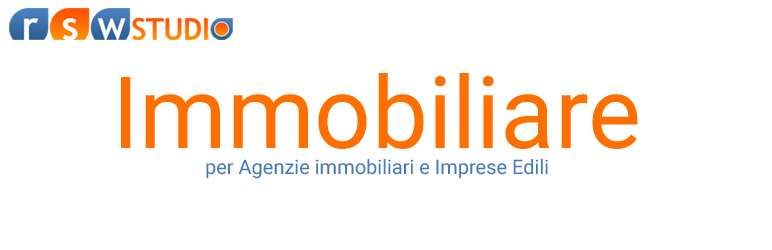
<style>
.page{position:relative;width:772px;height:250px;background:#ffffff}
.page>*{position:absolute;margin:0}
.t1{font:100px "Roboto-Regular";color:#ff6f00}
.t2{font:20px "Roboto-Regular";color:#4379b9}
</style>
<div class="page">
<p class="t1" style="left:121px;top:73px;width:517px;height:76px">Immobiliare</p>
<p class="t2" style="left:206px;top:159px;width:342px;height:20px">per Agenzie immobiliari e Imprese Edili</p>
</div>
